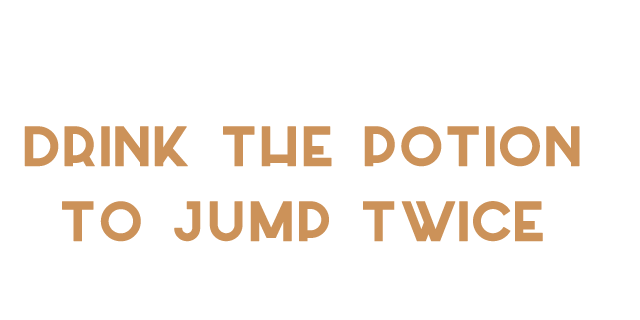
<style>
.page{position:relative;width:640px;height:320px;background:#ffffff}
.page>*{position:absolute;margin:0}
.t1{font:75px/75px "Azedo-Bold";letter-spacing:-0.01em;color:#cc9259;font-weight:bold}
</style>
<div class="page">
<p class="t1" style="left:24px;top:126px;width:556px;height:116px;text-align:center">Drink the potion<br>to jump twice</p>
</div>
